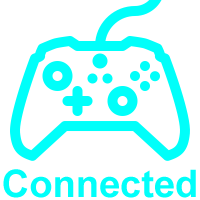
<style>
.page{position:relative;width:200px;height:200px;background:#ffffff}
.page>*{position:absolute;margin:0}
.t1{font:38px "Arial-BoldMT";color:#00fffa}
</style>
<div class="page">
<p class="t1" style="left:3px;top:169px;width:193px;height:29px">Connected!</p>
</div>
